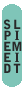
<style>
.page{position:relative;width:24px;height:92px;background:#7fc5b8}
.page>*{position:absolute;margin:0}
.t1{font:12.5px/11px "BellGothicStd-Black";letter-spacing:-0.025em;color:#292929}
</style>
<div class="page">
<p class="t1" style="left:3px;top:19px;width:19px;height:54px">S L<br>P I<br>EM<br>E I<br>D T</p>
</div>
